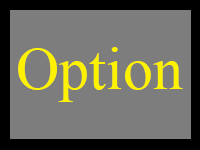
<style>
.page{position:relative;width:200px;height:150px;background:#7d7d7d}
.page>*{position:absolute;margin:0}
.t1{font:60px "TimesNewRomanPSMT";color:#fff200}
</style>
<div class="page">
<p class="t1" style="left:18px;top:47px;width:165px;height:55px">Option</p>
</div>
